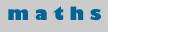
<style>
.page{position:relative;width:195px;height:32px;background:#ffffff}
.page>*{position:absolute;margin:0}
.t1{font:18px "GillSans-UltraBold";color:#006699}
</style>
<div class="page">
<p class="t1" style="left:8px;top:6px;width:93px;height:15px">m a t h s</p>
</div>
